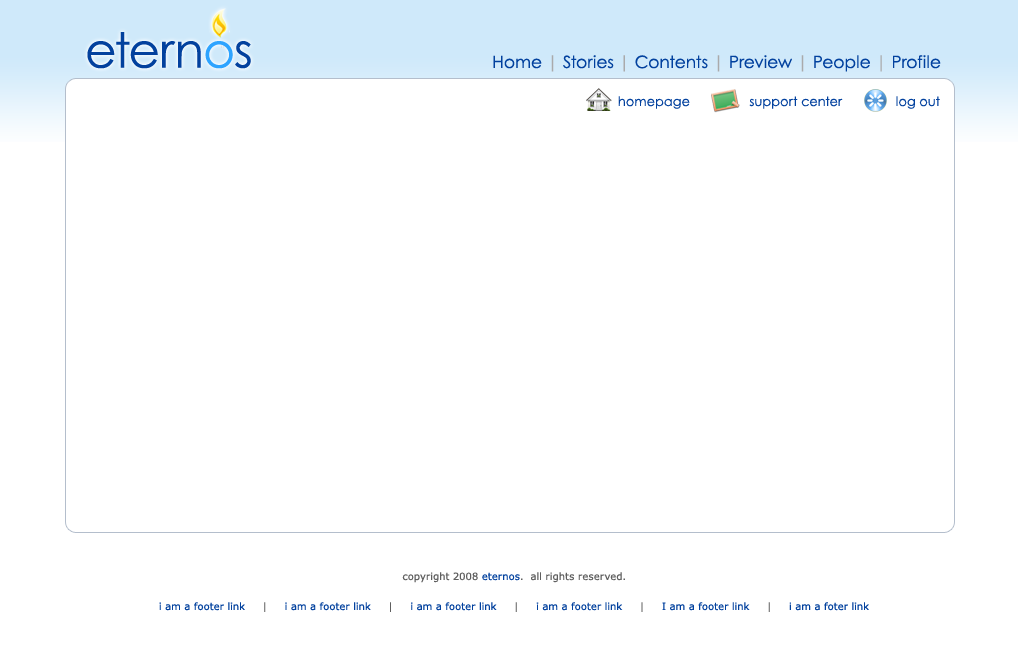
<style>
.page{position:relative;width:1018px;height:648px;background:#ffffff}
.page>*{position:absolute;margin:0}
.t1{font:48.6px "CenturyGothic";color:#02419e}
.t2{font:48.6px "CenturyGothic";color:#2ea4ff}
.t3{font:17px "CenturyGothic";color:#02419e}
.t4{font:17px "CenturyGothic";color:#aaaaab}
.t5{font:13px "CenturyGothic";color:#02419e}
.t6{font:10px "Verdana";color:#5f5f5f}
.t7{font:10px "Verdana";color:#02419e}
</style>
<div class="page">
<p class="t1" style="left:87px;top:32px;width:164px;height:37px">etern<span class="t2">o</span>s</p>
<p class="t3" style="left:493px;top:55px;width:448px;height:17px">Home <span class="t4">| </span>Stories <span class="t4">| </span>Contents <span class="t4">| </span>Preview <span class="t4">| </span>People <span class="t4">| </span>Profile</p>
<p class="t5" style="left:618px;top:96px;width:72px;height:13px">homepage</p>
<p class="t5" style="left:749px;top:96px;width:94px;height:13px">support center</p>
<p class="t5" style="left:896px;top:96px;width:44px;height:13px">log out</p>
<p class="t6" style="left:402px;top:572px;width:223px;height:11px">copyright 2008 <span class="t7">eternos</span>.  all rights reserved.</p>
<p class="t7" style="left:159px;top:602px;width:710px;height:10px">i am a footer link    <span class="t6"> |    </span> i am a footer link     <span class="t6">|    </span> i am a footer link     <span class="t6">|    </span> i am a footer link     <span class="t6">|     </span>I am a footer link    <span class="t6"> |     </span>i am a foter link</p>
</div>
